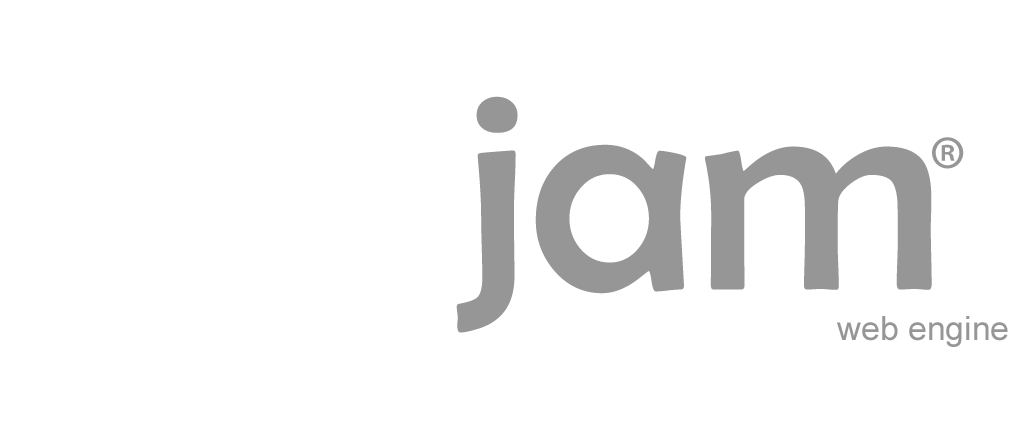
<style>
.page{position:relative;width:1024px;height:448px;background:#ffffff}
.page>*{position:absolute;margin:0}
.t1{font:298px "BerlinSansFB-Reg";color:#969696}
.t2{font:99.3px "MyriadPro-Cond";color:#969696}
.t3{font:33.5px "ArialMT";color:#969696}
</style>
<div class="page">
<p class="t1" style="left:456px;top:96px;width:476px;height:237px">jam</p>
<p class="t2" style="left:932px;top:137px;width:32px;height:32px">®</p>
<p class="t3" style="left:837px;top:316px;width:171px;height:31px">web engine</p>
</div>
